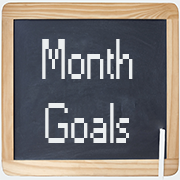
<style>
.page{position:relative;width:180px;height:180px}
.page>*{position:absolute;margin:0}
.t1{font:53.3px "Small Fonts";color:#eceff0;scale:0.77 1}
</style>
<div class="page">
<p class="t1" style="left:42px;top:39px;width:91px;height:104px;text-align:center">Month<br>Goals</p>
</div>
